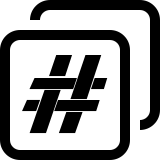
<style>
.page{position:relative;width:160px;height:160px;background:#ffffff}
.page>*{position:absolute;margin:0}
.t1{font:120px "CyrillicRevue";letter-spacing:0.2em;color:#000000}
</style>
<div class="page">
<p class="t1" style="left:22px;top:55px;width:86px;height:79px">#</p>
</div>
